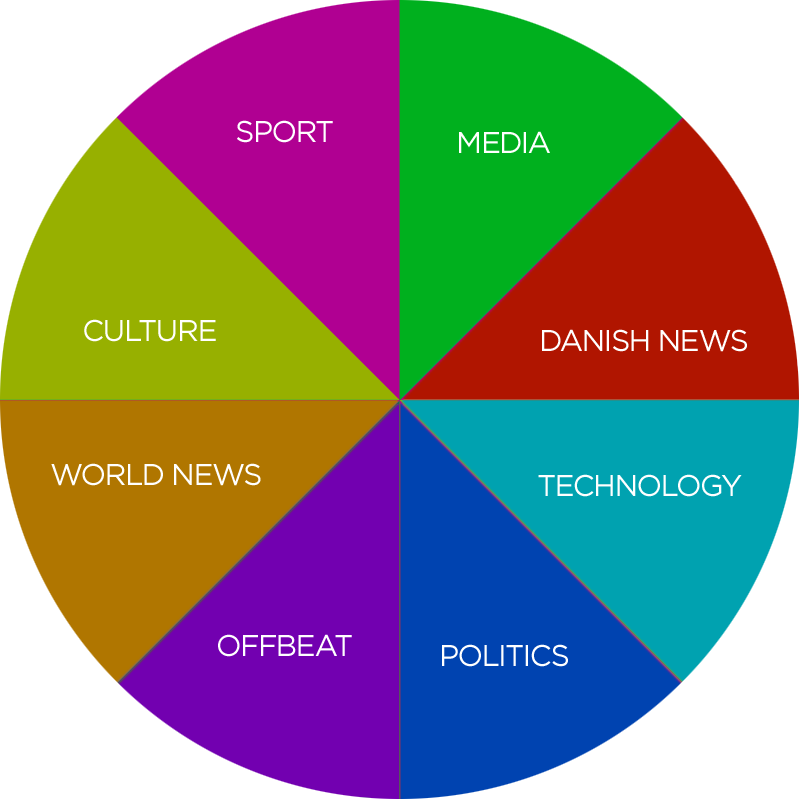
<style>
.page{position:relative;width:800px;height:800px;background:#ffffff}
.page>*{position:absolute;margin:0}
.t1{font:30px "GothamBook";letter-spacing:-0.05em;color:#ffffff}
</style>
<div class="page">
<p class="t1" style="left:237px;top:120px;width:96px;height:23px">SPORT</p>
<p class="t1" style="left:459px;top:131px;width:91px;height:22px">MEDIA</p>
<p class="t1" style="left:84px;top:319px;width:132px;height:23px">CULTURE</p>
<p class="t1" style="left:542px;top:329px;width:205px;height:23px">DANISH NEWS</p>
<p class="t1" style="left:51px;top:463px;width:210px;height:23px">WORLD NEWS</p>
<p class="t1" style="left:538px;top:474px;width:204px;height:23px">TECHNOLOGY</p>
<p class="t1" style="left:218px;top:634px;width:134px;height:23px">OFFBEAT</p>
<p class="t1" style="left:442px;top:644px;width:126px;height:23px">POLITICS</p>
</div>
